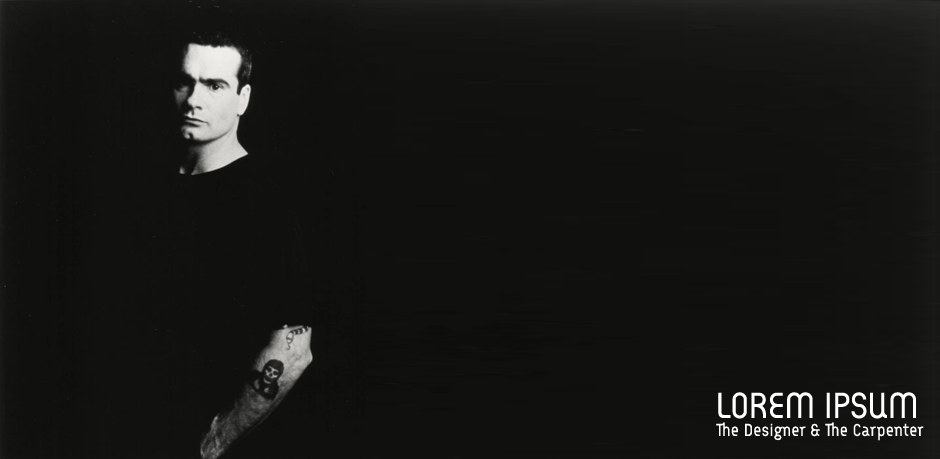
<style>
.page{position:relative;width:940px;height:459px;background:#10100e}
.page>*{position:absolute;margin:0}
.t1{font:17.4px/9px "Arcus";letter-spacing:0.025em;color:#ffffff}
.t2{font:36.4px/9px "Arcus";color:#ffffff}
</style>
<div class="page">
<p class="t1" style="left:716px;top:392px;width:208px;height:49px"><span class="t2">LOREM IPSUM<br><br></span>The Designer &amp; The Carpenter</p>
</div>
